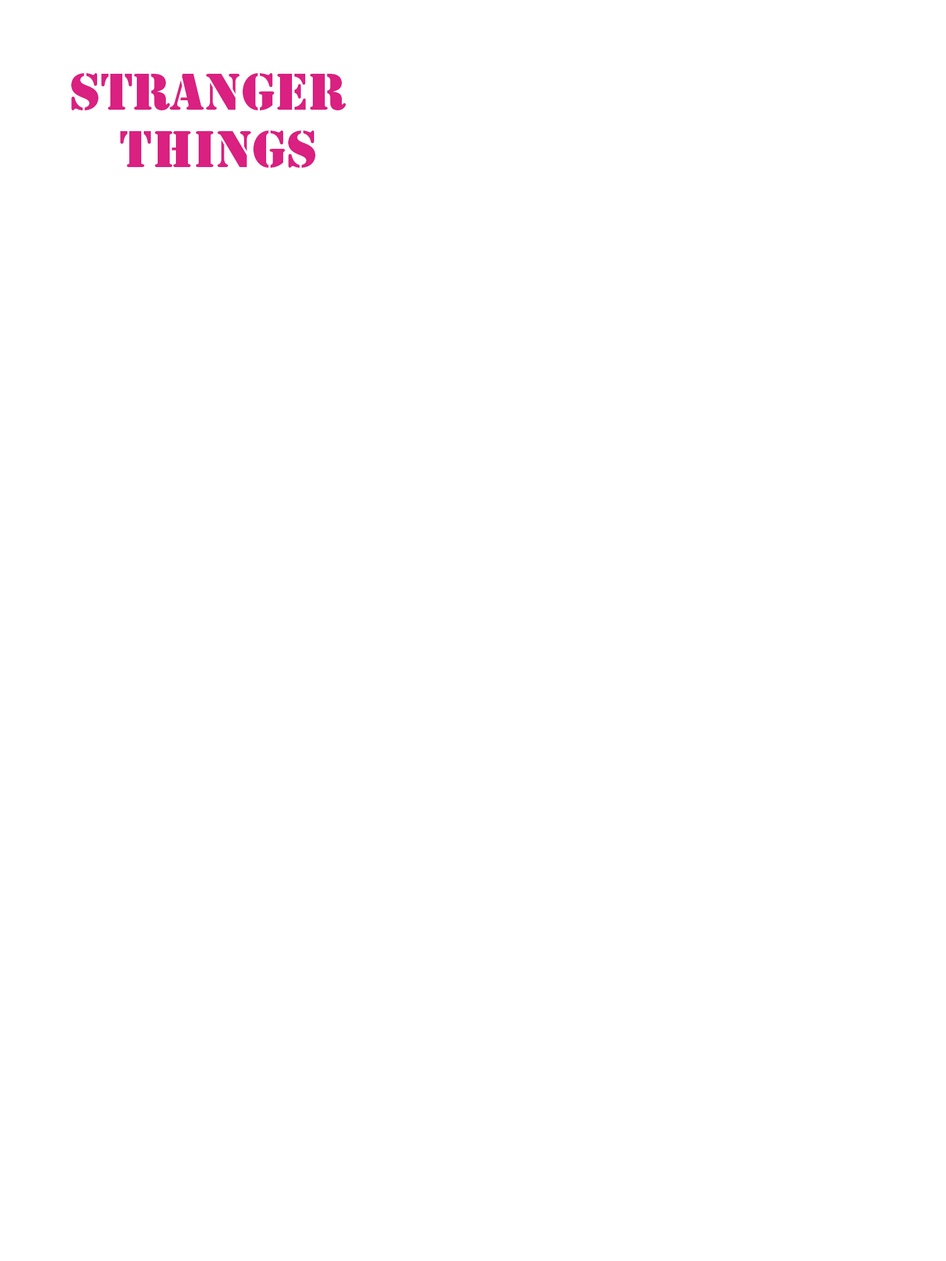
<style>
.page{position:relative;width:946px;height:1261px;background:#ffffff}
.page>*{position:absolute;margin:0}
.t1{font:48.1px "StencilStd";color:#da2080}
</style>
<div class="page">
<p class="t1" style="left:71px;top:73px;width:275px;height:95px">STRANGER<br>   THINGS</p>
</div>
